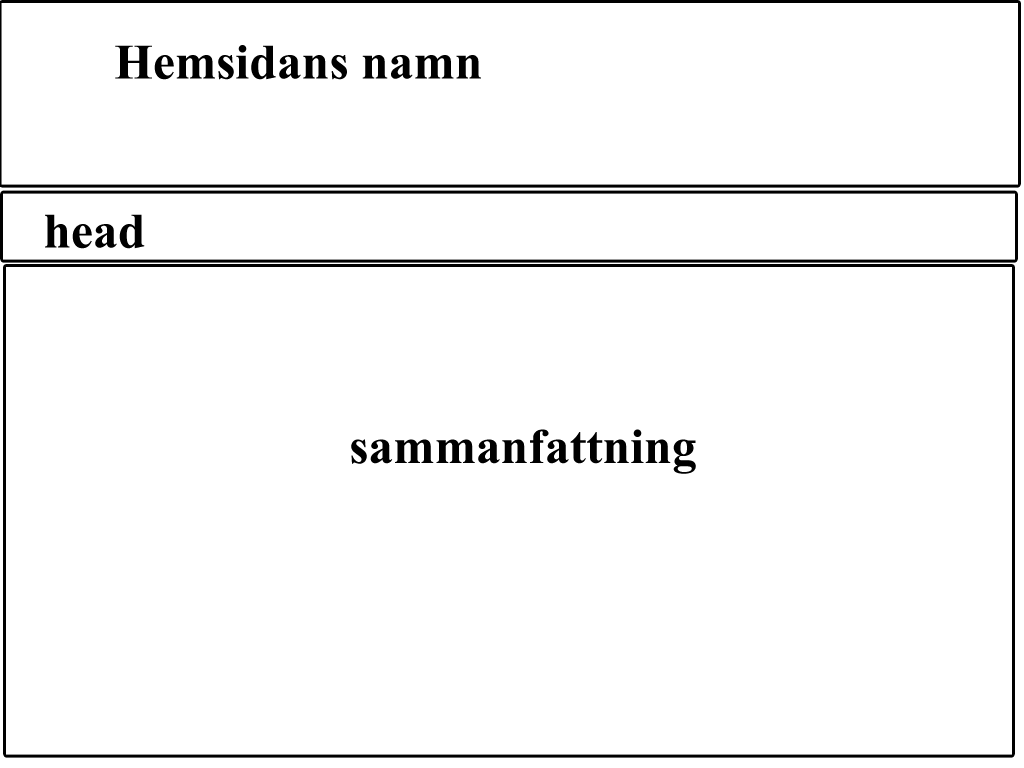
<style>
.page{position:relative;width:1024px;height:768px;background:#ffffff}
.page>*{position:absolute;margin:0}
.t1{font:60px "ShonarBangla-Bold";color:#000000}
</style>
<div class="page">
<p class="t1" style="left:115px;top:45px;width:366px;height:35px">Hemsidans namn</p>
<p class="t1" style="left:45px;top:214px;width:100px;height:35px">head</p>
<p class="t1" style="left:351px;top:429px;width:345px;height:45px">sammanfattning</p>
</div>
